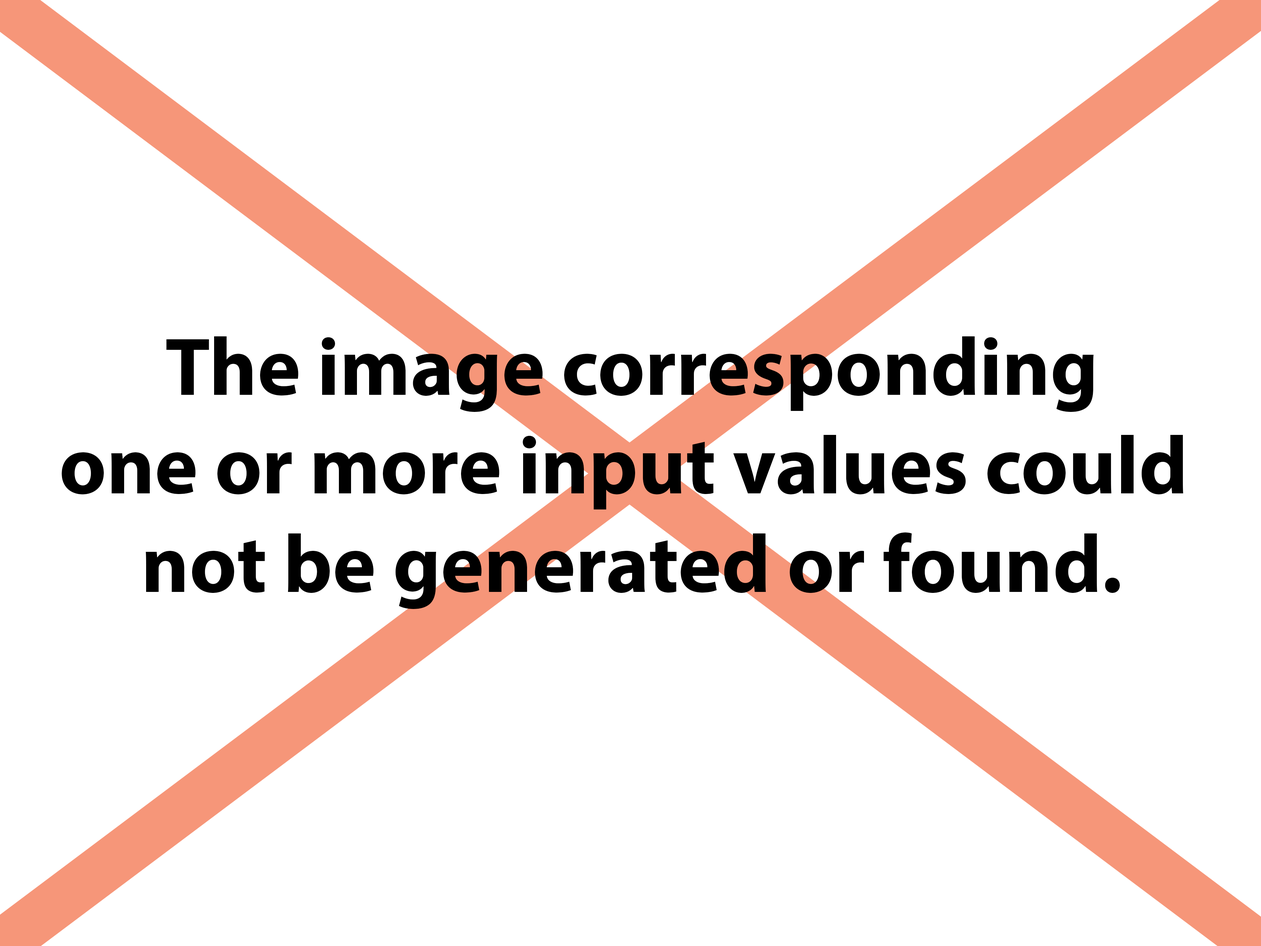
<style>
.page{position:relative;width:1261px;height:946px;background:#ffffff}
.page>*{position:absolute;margin:0}
.t1{font:82.1px "MyriadPro-Bold";color:#000000}
</style>
<div class="page">
<p class="t1" style="left:62px;top:336px;width:1121px;height:273px;text-align:center">The image corresponding<br>one or more input values could <br>not be generated or found.</p>
</div>
